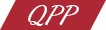
<style>
.page{position:relative;width:106px;height:30px;background:#ae2735}
.page>*{position:absolute;margin:0}
.t1{font:26.3px "DancingScript-Bold";color:#ffffff}
</style>
<div class="page">
<p class="t1" style="left:28px;top:5px;width:51px;height:21px">QPP</p>
</div>
